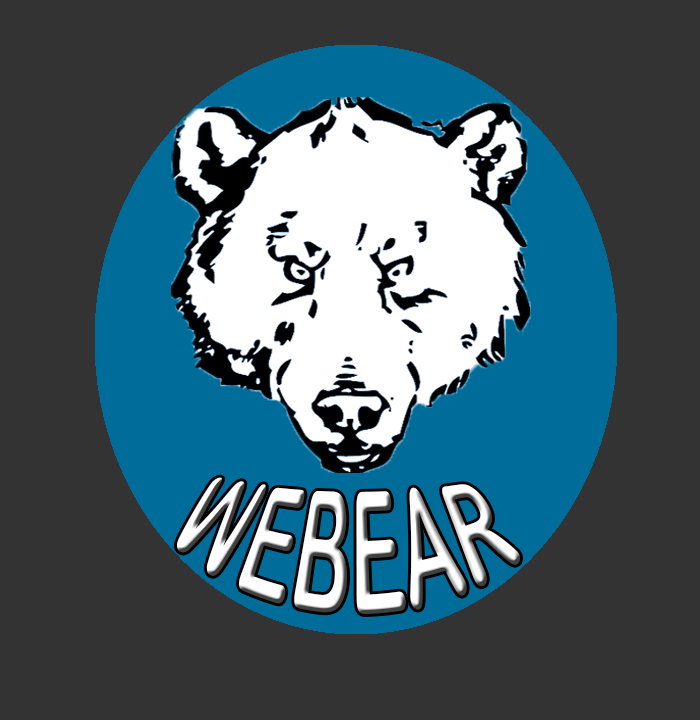
<style>
.page{position:relative;width:700px;height:720px;background:#333333}
.page>*{position:absolute;margin:0}
.t1{font:78.8px "ArialRoundedMTBold";color:#ffffff}
</style>
<div class="page">
<p class="t1" style="left:177px;top:477px;width:343px;height:137px">WEBEAR</p>
</div>
